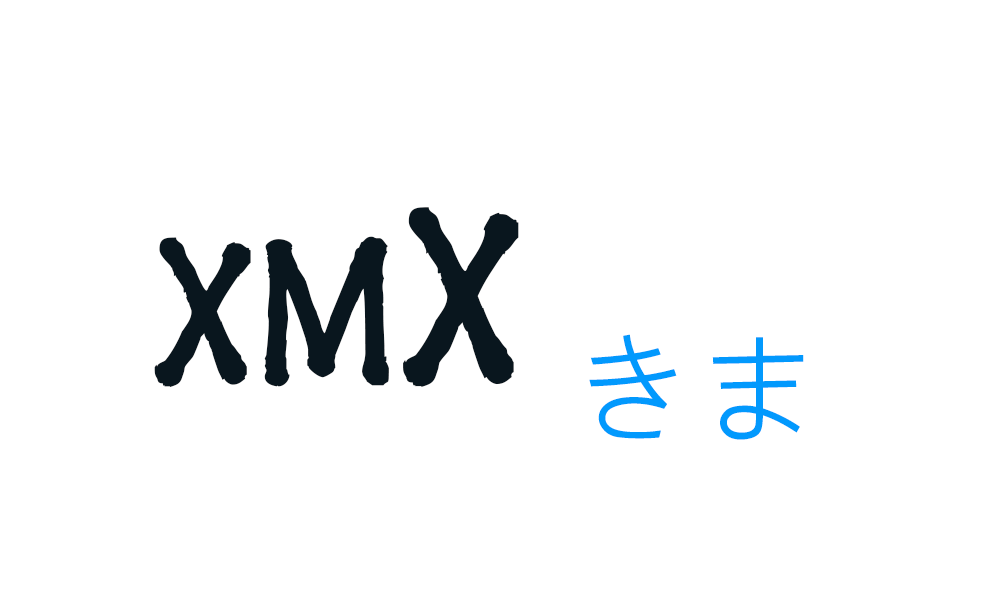
<style>
.page{position:relative;width:988px;height:607px;background:#ffffff}
.page>*{position:absolute;margin:0}
.t1{font:208.3px "SegoeMarker";color:#09161e}
.t2{font:250px "SegoeMarker";color:#09161e}
.t3{font:125px "MicrosoftJhengHeiRegular";color:#0299fd}
</style>
<div class="page">
<p class="t1" style="left:154px;top:207px;width:365px;height:181px">XM<span class="t2">X</span></p>
<p class="t3" style="left:589px;top:334px;width:215px;height:106px">きま</p>
</div>
